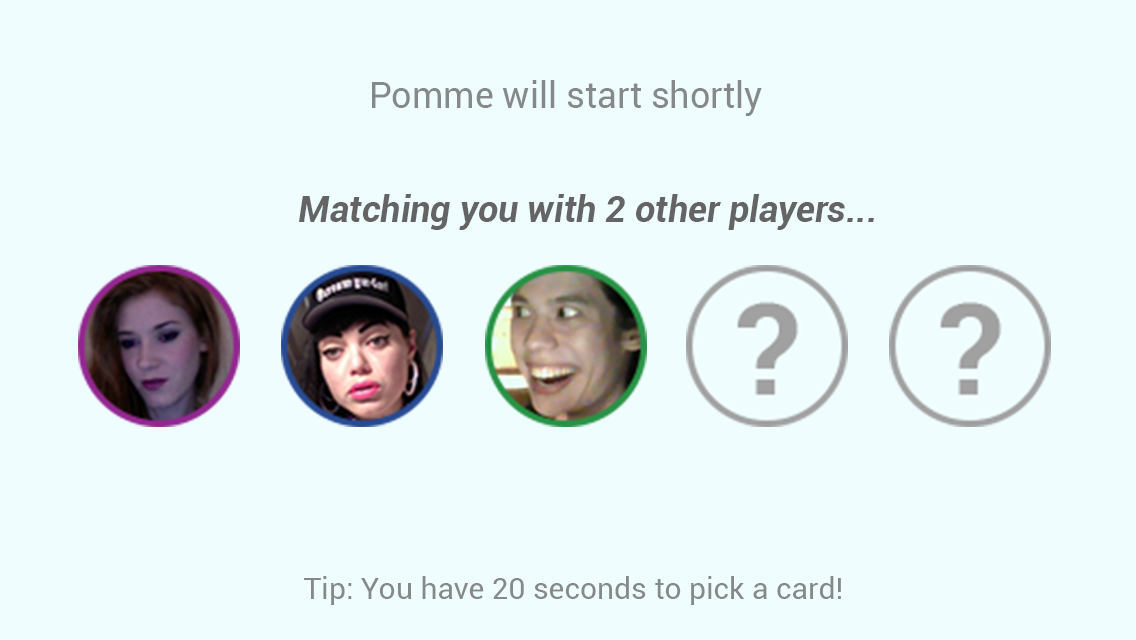
<style>
.page{position:relative;width:1136px;height:640px;background:#f0fdff}
.page>*{position:absolute;margin:0}
.t1{font:36px "Roboto-Regular";color:#86898a}
.t2{font:36px "Roboto-BoldItalic";color:#646464}
.t3{font:30px "Roboto-Regular";color:#86898a}
</style>
<div class="page">
<p class="t1" style="left:372px;top:80px;width:390px;height:36px">Pomme will start shortly</p>
<p class="t2" style="left:299px;top:194px;width:575px;height:36px">Matching you with 2 other players...</p>
<p class="t3" style="left:304px;top:576px;width:537px;height:29px">Tip: You have 20 seconds to pick a card!</p>
</div>
